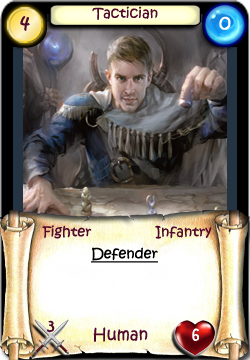
<style>
.page{position:relative;width:250px;height:360px}
.page>*{position:absolute;margin:0}
.t1{font:14px "KristenITC-Regular";color:#51092d}
.t2{font:20px "KristenITC-Regular";color:#51092d}
.t3{font:20px "KristenITC-Regular";color:#ffffff}
.t4{font:14px "KristenITC-Regular";color:#000000;text-decoration:underline}
.t5{font:16px "KristenITC-Regular";color:#51092d}
.t6{font:16px "KristenITC-Regular";color:#fefefe}
</style>
<div class="page">
<p class="t1" style="left:92px;top:6px;width:66px;height:14px">Tactician</p>
<p class="t2" style="left:20px;top:16px;width:10px;height:15px">4</p>
<p class="t3" style="left:219px;top:16px;width:12px;height:14px">0</p>
<p class="t1" style="left:42px;top:225px;width:50px;height:14px">Fighter</p>
<p class="t1" style="left:155px;top:225px;width:57px;height:14px">Infantry</p>
<p class="t4" style="left:91px;top:247px;width:67px;height:16px">Defender</p>
<p class="t5" style="left:47px;top:320px;width:8px;height:12px">3</p>
<p class="t5" style="left:93px;top:327px;width:55px;height:15px">Human</p>
<p class="t6" style="left:192px;top:328px;width:7px;height:13px">6</p>
</div>
